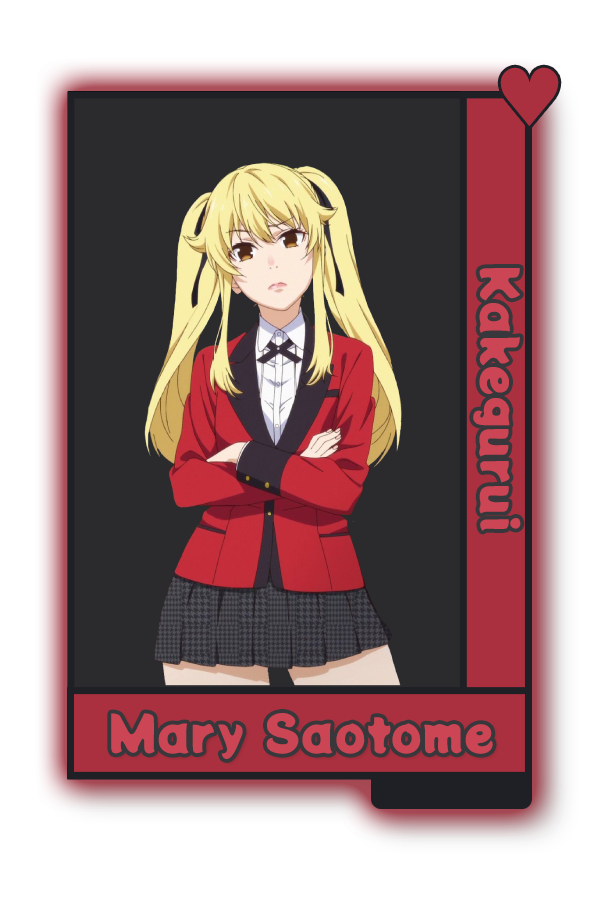
<style>
.page{position:relative;width:600px;height:900px;background:#2b2a2d}
.page>*{position:absolute;margin:0}
.t1{font:80px "DejaVuSans";color:#ab303f}
.t2{font:50px "PottaOne-Regular";color:#cb4554}
</style>
<div class="page">
<p class="t1" style="left:500px;top:67px;width:59px;height:59px">♥</p>
<p class="t2" style="left:473px;top:268px;width:48px;height:263px;rotate:90deg">Kakegurui</p>
<p class="t2" style="left:111px;top:712px;width:382px;height:48px">Mary Saotome</p>
</div>
